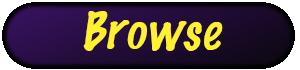
<style>
.page{position:relative;width:300px;height:70px}
.page>*{position:absolute;margin:0}
.t1{font:48px "MarkerFelt-Thin";color:#fff030;font-style:italic}
</style>
<div class="page">
<p class="t1" style="left:83px;top:11px;width:140px;height:40px">Browse</p>
</div>
